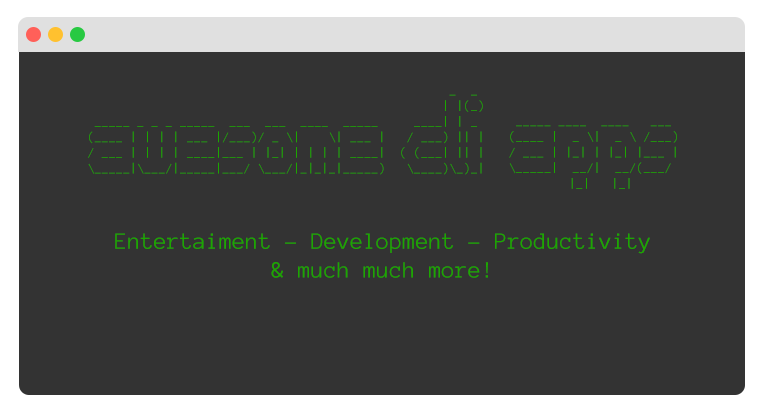
<style>
.page{position:relative;width:763px;height:418px;background:#333333}
.page>*{position:absolute;margin:0}
.t1{font:13px "AnonymousPro";color:#1ca700}
.t2{font:24px "AnonymousPro";color:#1ca700}
</style>
<div class="page">
<p class="t1" style="left:88px;top:94px;width:395px;height:81px;text-align:center">_  _ <br>                                                  | |(_)<br> _____ _ _ _ _____  ___  ___  ____  _____     ____| | _ <br>(____ | | | | ___ |/___)/ _ \|    \| ___ |   / ___) || |<br>/ ___ | | | | ____|___ | |_| | | | | ____|  ( (___| || |<br>\_____|\___/|_____|___/ \___/|_|_|_|_____)   \____)\_)_|</p>
<p class="t1" style="left:509px;top:125px;width:168px;height:64px;text-align:center">_____ ____  ____   ___ <br>(____ |  _ \|  _ \ /___)<br>/ ___ | |_| | |_| |___ |<br>\_____|  __/|  __/(___/ <br>      |_|   |_|</p>
<p class="t2" style="left:115px;top:233px;width:535px;height:45px;text-align:center">Entertaiment - Development - Productivity<br>&amp; much much more!</p>
</div>
